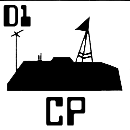
<style>
.page{position:relative;width:130px;height:130px;background:#ffffff}
.page>*{position:absolute;margin:0}
.t1{font:25px "Checkbook";letter-spacing:0.06em;color:#000000;font-weight:bold}
.t2{font:33.3px "Checkbook";letter-spacing:0.06em;color:#000000;font-weight:bold}
</style>
<div class="page">
<p class="t1" style="left:3px;top:4px;width:28px;height:22px">D1</p>
<p class="t2" style="left:46px;top:96px;width:40px;height:29px">CP</p>
</div>
